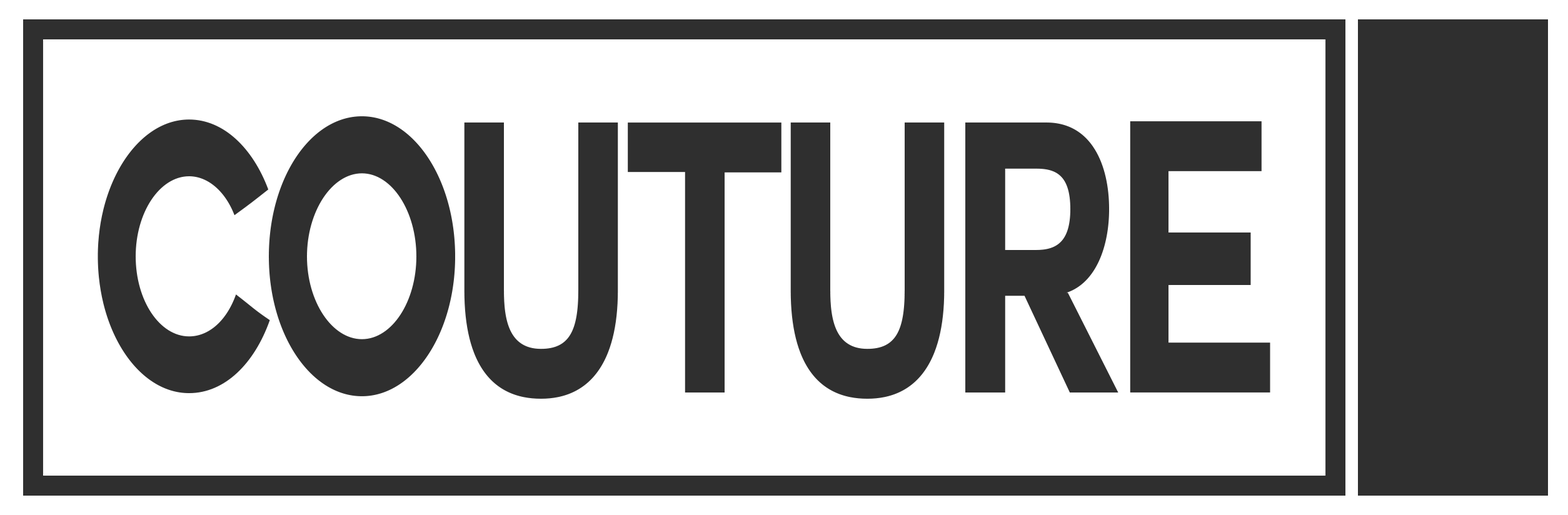
<style>
.page{position:relative;width:1568px;height:515px;background:#ffffff}
.page>*{position:absolute;margin:0}
.t1{font:378.2px "Couture-Bold";letter-spacing:-0.05em;color:#2f2f2f;scale:0.67 1}
</style>
<div class="page">
<p class="t1" style="left:98px;top:116px;width:1172px;height:283px">COUTURE</p>
</div>
